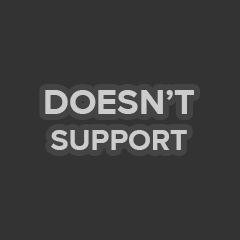
<style>
.page{position:relative;width:240px;height:240px;background:#333333}
.page>*{position:absolute;margin:0}
.t1{font:36px "ProximaNova-Bold";color:#cccccc;text-transform:uppercase}
.t2{font:30px "ProximaNova-Bold";color:#cccccc;text-transform:uppercase}
</style>
<div class="page">
<p class="t1" style="left:45px;top:90px;width:149px;height:60px;text-align:center">Doesn’t<br><span class="t2">Support</span></p>
</div>
